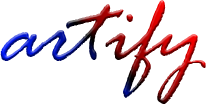
<style>
.page{position:relative;width:206px;height:104px;background:#ffffff}
.page>*{position:absolute;margin:0}
.t1{font:100px "RageItalic"}
</style>
<div class="page">
<p class="t1" style="left:0px;top:0px;width:206px;height:104px">artify</p>
</div>
